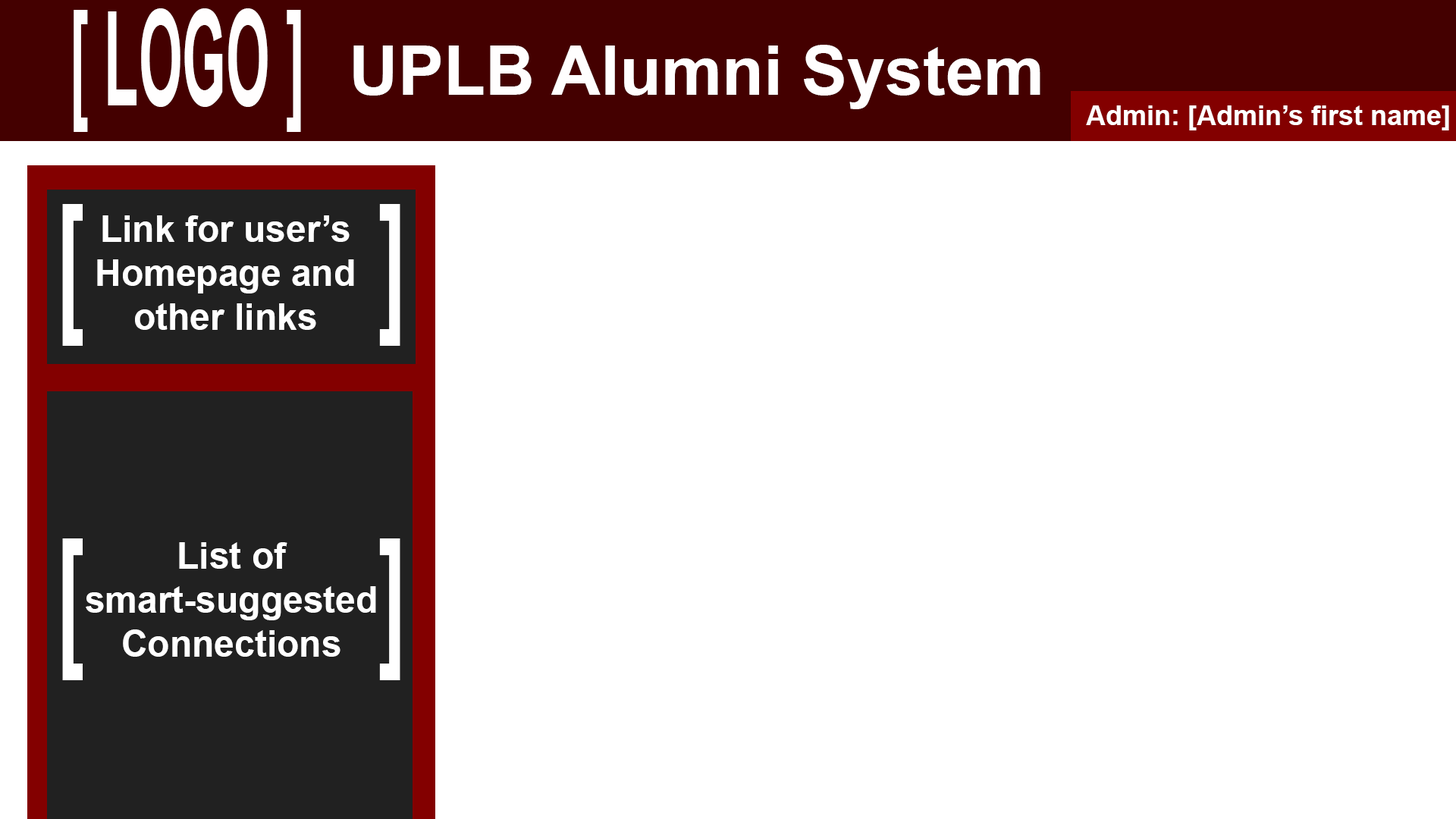
<style>
.page{position:relative;width:1456px;height:819px;background:#ffffff}
.page>*{position:absolute;margin:0}
.t1{font:132.9px "Arial-BoldMT";color:#fffefe;scale:0.42 1}
.t2{font:68.2px "Arial-BoldMT";color:#fffefe}
.t3{font:27.3px "Arial-BoldMT";color:#ffffff}
.t4{font:154.8px "Arial-BoldMT";color:#ffffff;scale:0.53 1}
.t5{font:36.4px "Arial-BoldMT";color:#ffffff}
</style>
<div class="page">
<p class="t1" style="left:74px;top:8px;width:227px;height:124px">[ LOGO ]</p>
<p class="t2" style="left:353px;top:45px;width:687px;height:64px">UPLB Alumni System</p>
<p class="t3" style="left:1086px;top:105px;width:363px;height:25px">Admin: [Admin’s first name]</p>
<p class="t4" style="left:62px;top:204px;width:338px;height:142px">[             ]</p>
<p class="t5" style="left:97px;top:215px;width:257px;height:115px;text-align:center">Link for user’s Homepage and other links</p>
<p class="t4" style="left:62px;top:538px;width:338px;height:142px">[             ]</p>
<p class="t5" style="left:86px;top:542px;width:290px;height:115px;text-align:center">List of<br>smart-suggested Connections</p>
</div>
